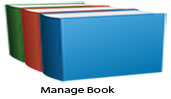
<style>
.page{position:relative;width:171px;height:99px;background:#ffffff}
.page>*{position:absolute;margin:0}
.t1{font:8.9px "MyriadPro-Regular";color:#000000;scale:1.45 1}
</style>
<div class="page">
<p class="t1" style="left:41px;top:86px;width:74px;height:9px">Manage Book</p>
</div>
